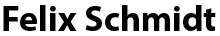
<style>
.page{position:relative;width:220px;height:36px;background:#ffffff}
.page>*{position:absolute;margin:0}
.t1{font:36px "MyriadPro-Bold";color:#000000}
</style>
<div class="page">
<p class="t1" style="left:3px;top:5px;width:213px;height:26px">Felix Schmidt</p>
</div>
